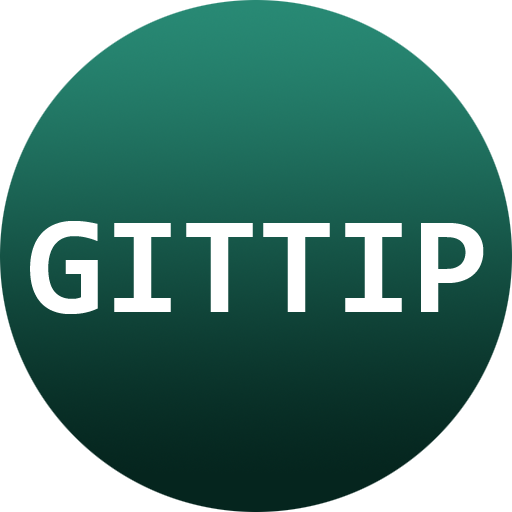
<style>
.page{position:relative;width:512px;height:512px;background:#ffffff}
.page>*{position:absolute;margin:0}
.t1{font:140px "Consolas-Bold";color:#ffffff}
</style>
<div class="page">
<p class="t1" style="left:30px;top:221px;width:454px;height:93px">GITTIP</p>
</div>
